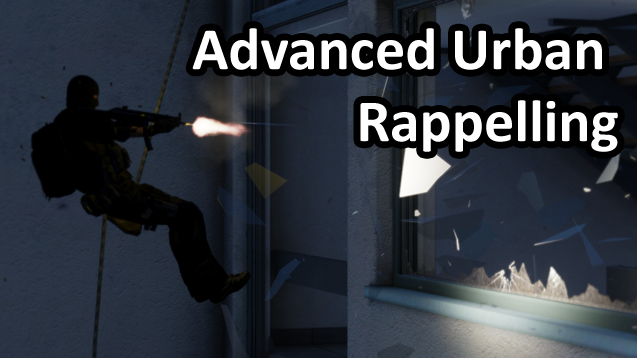
<style>
.page{position:relative;width:637px;height:358px}
.page>*{position:absolute;margin:0}
.t1{font:60px "Calibri-Bold";color:#ffffff}
</style>
<div class="page">
<p class="t1" style="left:192px;top:28px;width:426px;height:124px;text-align:right">Advanced Urban <br>Rappelling</p>
</div>
